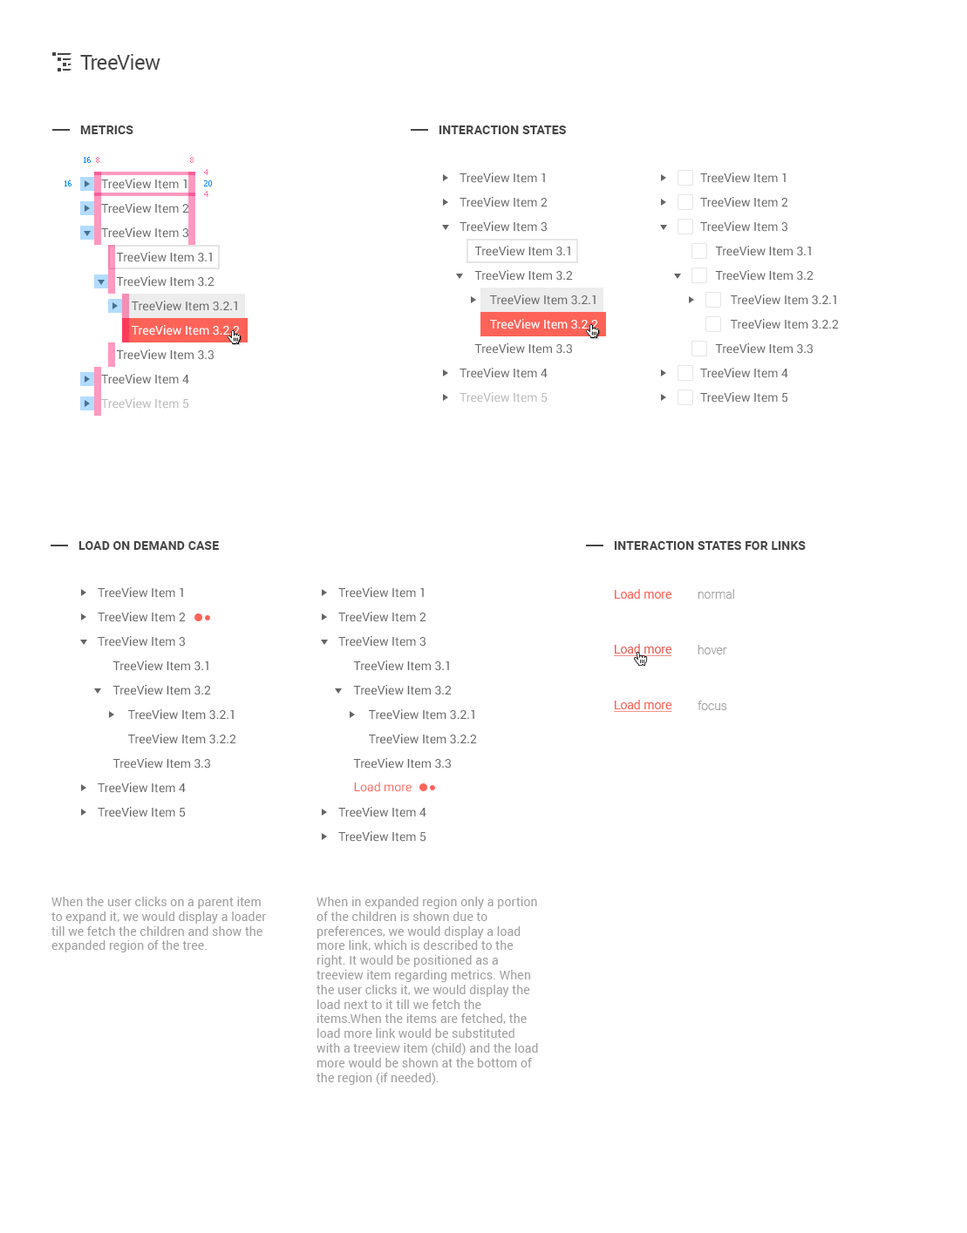
<style>
.page{position:relative;width:967px;height:1233px;background:#ffffff}
.page>*{position:absolute;margin:0}
.t1{font:20.9px "Roboto-Regular";letter-spacing:-0.025em;color:#454545}
.t2{font:12.2px "Roboto-Bold";letter-spacing:0.01em;color:#454545;text-transform:uppercase}
.t3{font:7.8px "Tahoma";color:#008aff}
.t4{font:7.8px "Tahoma";color:#ff7cae}
.t5{font:12.2px/24.4px "Roboto-Regular";color:#656565}
.t6{font:12.2px/24.4px "Roboto-Regular";color:#ffffff}
.t7{font:12.2px/24.4px "Roboto-Regular";color:#bababa}
.t8{font:12.2px "Roboto-Regular";color:#ff6358}
.t9{font:12.2px/55.8px "Roboto-Light";color:#a1a1a1}
.t10{font:12.2px "Roboto-Regular";color:#e76057;text-decoration:underline}
.t11{font:12.2px "Roboto-Regular";color:#ff6358;text-decoration:underline}
.t12{font:12.2px "Roboto-Regular";letter-spacing:0.01em;color:#9e9e9e}
</style>
<div class="page">
<p class="t1" style="left:80px;top:54px;width:80px;height:16px">TreeView</p>
<p class="t2" style="left:80px;top:126px;width:53px;height:8px">Metrics</p>
<p class="t2" style="left:438px;top:126px;width:128px;height:8px">Interaction states</p>
<p class="t3" style="left:84px;top:157px;width:7px;height:6px">16</p>
<p class="t4" style="left:96px;top:157px;width:3px;height:6px">8</p>
<p class="t4" style="left:190px;top:157px;width:4px;height:6px">8</p>
<p class="t4" style="left:204px;top:169px;width:4px;height:6px">4</p>
<p class="t5" style="left:459px;top:173px;width:139px;height:230px">TreeView Item 1<br>TreeView Item 2<br>TreeView Item 3<br>     TreeView Item 3.1<br>     TreeView Item 3.2<br>          TreeView Item 3.2.1<br>          <span class="t6">TreeView Item 3.2.2<br></span>     TreeView Item 3.3<br>TreeView Item 4<br><span class="t7">TreeView Item 5</span></p>
<p class="t5" style="left:700px;top:173px;width:139px;height:230px">TreeView Item 1<br>TreeView Item 2<br>TreeView Item 3<br>     TreeView Item 3.1<br>     TreeView Item 3.2<br>          TreeView Item 3.2.1<br>          TreeView Item 3.2.2<br>     TreeView Item 3.3<br>TreeView Item 4<br>TreeView Item 5</p>
<p class="t3" style="left:65px;top:180px;width:6px;height:7px">16</p>
<p class="t5" style="left:101px;top:179px;width:139px;height:230px">TreeView Item 1<br>TreeView Item 2<br>TreeView Item 3<br>     TreeView Item 3.1<br>     TreeView Item 3.2<br>          TreeView Item 3.2.1<br>          <span class="t6">TreeView Item 3.2.2<br></span>     TreeView Item 3.3<br>TreeView Item 4<br><span class="t7">TreeView Item 5</span></p>
<p class="t3" style="left:204px;top:180px;width:8px;height:7px">20</p>
<p class="t4" style="left:204px;top:191px;width:4px;height:6px">4</p>
<p class="t2" style="left:78px;top:541px;width:141px;height:9px">load on demand case</p>
<p class="t2" style="left:614px;top:541px;width:191px;height:9px">interaction states for links</p>
<p class="t5" style="left:98px;top:588px;width:138px;height:230px">TreeView Item 1<br>TreeView Item 2<br>TreeView Item 3<br>     TreeView Item 3.1<br>     TreeView Item 3.2<br>          TreeView Item 3.2.1<br>          TreeView Item 3.2.2<br>     TreeView Item 3.3<br>TreeView Item 4<br>TreeView Item 5</p>
<p class="t5" style="left:338px;top:588px;width:139px;height:254px">TreeView Item 1<br>TreeView Item 2<br>TreeView Item 3<br>     TreeView Item 3.1<br>     TreeView Item 3.2<br>          TreeView Item 3.2.1<br>          TreeView Item 3.2.2<br>     TreeView Item 3.3<br><br>TreeView Item 4<br>TreeView Item 5</p>
<p class="t8" style="left:615px;top:589px;width:56px;height:10px">Load more</p>
<p class="t9" style="left:697px;top:589px;width:37px;height:121px">normal<br>hover<br>focus</p>
<p class="t10" style="left:614px;top:644px;width:58px;height:12px">Load more</p>
<p class="t11" style="left:614px;top:700px;width:58px;height:12px">Load more</p>
<p class="t8" style="left:354px;top:782px;width:57px;height:10px">Load more</p>
<p class="t12" style="left:51px;top:897px;width:215px;height:56px">When the user clicks on a parent item to expand it, we would display a loader till we fetch the children and show the expanded region of the tree.</p>
<p class="t12" style="left:316px;top:897px;width:222px;height:188px">When in expanded region only a portion of the children is shown due to preferences, we would display a load more link, which is described to the right. It would be positioned as a treeview item regarding metrics. When the user clicks it, we would display the load next to it till we fetch the items.When the items are fetched, the load more link would be substituted with a treeview item (child) and the load more would be shown at the bottom of the region (if needed).</p>
</div>
